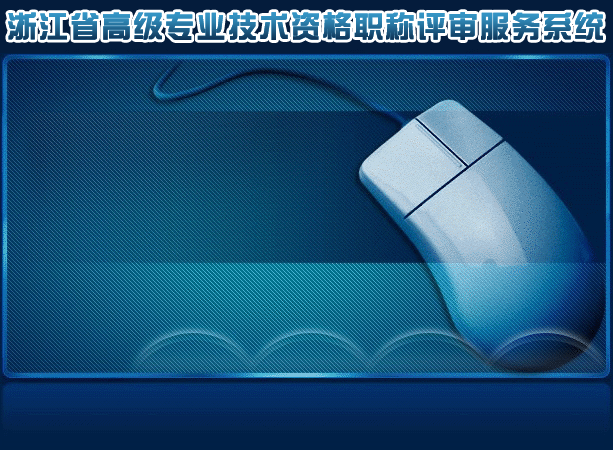
<style>
.page{position:relative;width:613px;height:450px}
.page>*{position:absolute;margin:0}
.t1{font:30px "DFZongYi-Bd-80-Win-GB";letter-spacing:0.05em}
</style>
<div class="page">
<p class="t1" style="left:8px;top:12px;width:595px;height:28px">浙江省高级专业技术资格职称评审服务系统</p>
</div>
